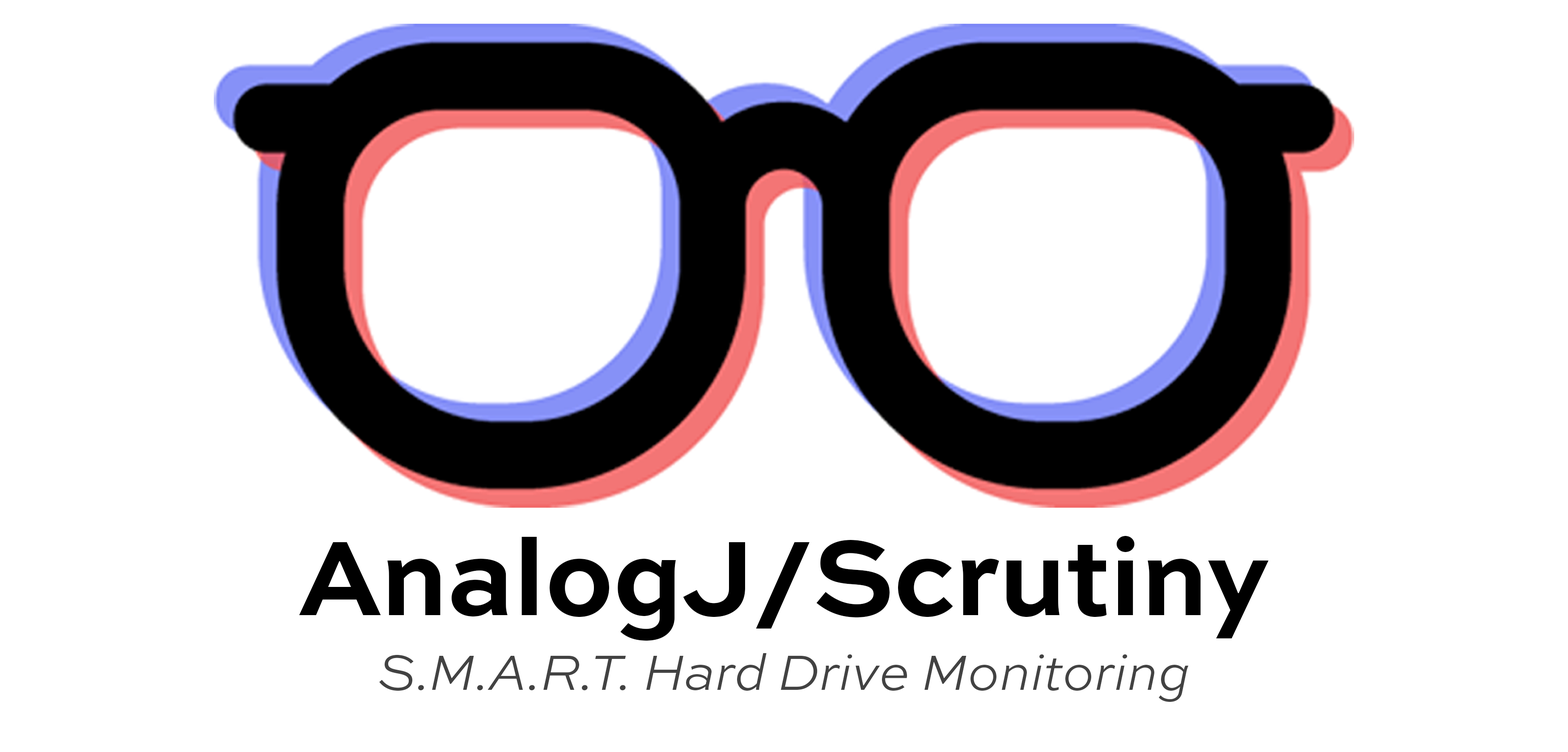
<style>
.page{position:relative;width:1568px;height:752px;background:#ffffff}
.page>*{position:absolute;margin:0}
.t1{font:111.8px "SweetSansPro-Bold";letter-spacing:-0.01em;color:#000000}
.t2{font:52.2px "SweetSansPro-LightItalic";letter-spacing:-0.01em;color:#424242}
</style>
<div class="page">
<p class="t1" style="left:299px;top:536px;width:970px;height:104px">AnalogJ/Scrutiny</p>
<p class="t2" style="left:379px;top:653px;width:810px;height:49px">S.M.A.R.T. Hard Drive Monitoring</p>
</div>
